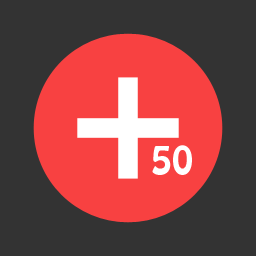
<style>
.page{position:relative;width:256px;height:256px;background:#333333}
.page>*{position:absolute;margin:0}
.t1{font:36px "HoboStd";color:#ffffff}
</style>
<div class="page">
<p class="t1" style="left:152px;top:145px;width:40px;height:30px">50</p>
</div>
